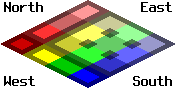
<style>
.page{position:relative;width:176px;height:88px;background:#ffffff}
.page>*{position:absolute;margin:0}
.t1{font:14px "TerminusTTF-Bold";color:#000000}
</style>
<div class="page">
<p class="t1" style="left:4px;top:2px;width:39px;height:10px">North</p>
<p class="t1" style="left:141px;top:2px;width:31px;height:10px">East</p>
<p class="t1" style="left:4px;top:76px;width:31px;height:10px">West</p>
<p class="t1" style="left:133px;top:76px;width:39px;height:10px">South</p>
</div>
